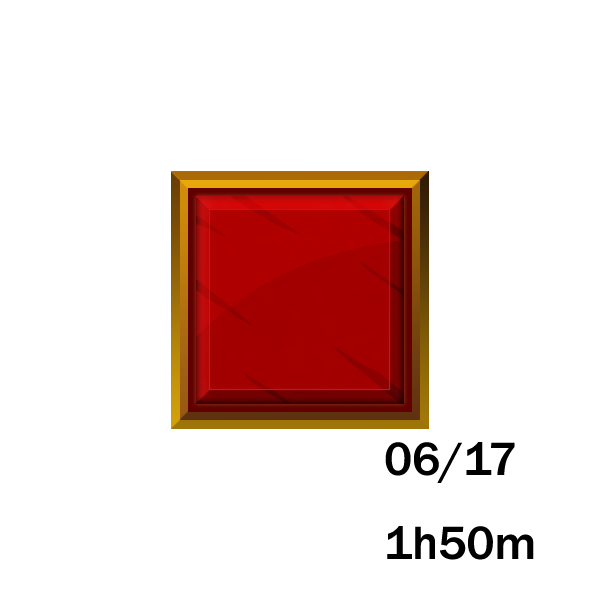
<style>
.page{position:relative;width:600px;height:600px;background:#ffffff}
.page>*{position:absolute;margin:0}
.t1{font:48px "FranklinGothic-Medium";color:#000000}
</style>
<div class="page">
<p class="t1" style="left:385px;top:442px;width:149px;height:118px">06/17<br>1h50m</p>
</div>
